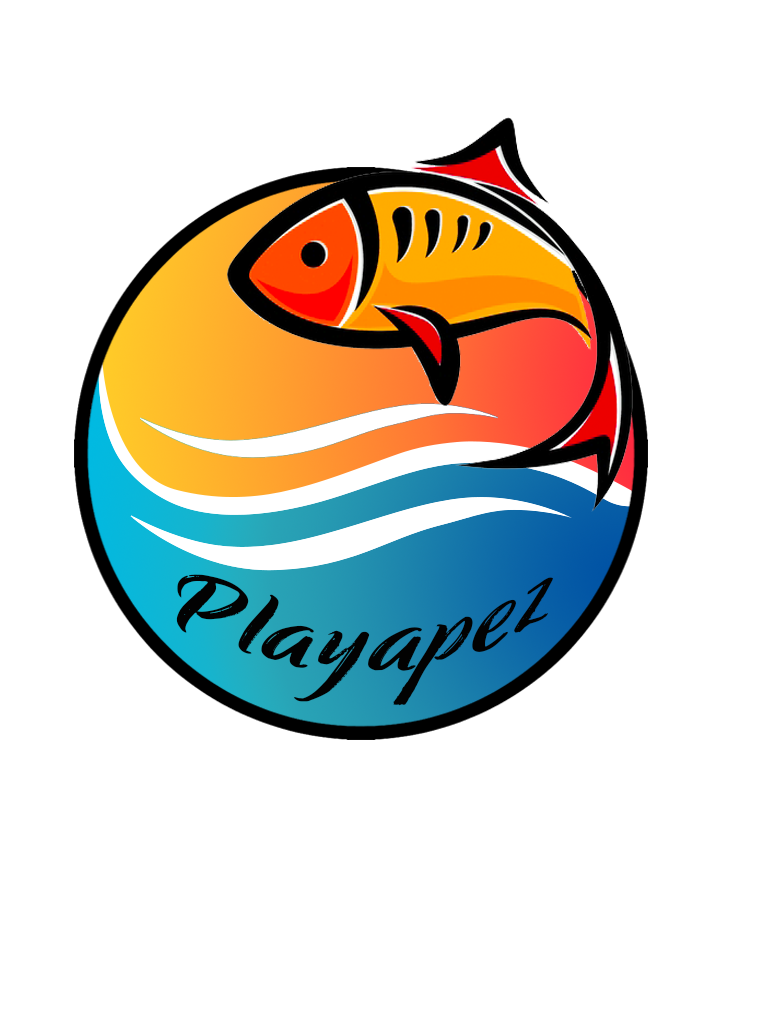
<style>
.page{position:relative;width:768px;height:1024px;background:#ffffff}
.page>*{position:absolute;margin:0}
.t1{font:108.1px "Ringtrack-Demo";color:#020202;scale:1.37 1}
</style>
<div class="page">
<p class="t1" style="left:176px;top:574px;width:377px;height:132px">Playapez</p>
</div>
